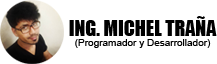
<style>
.page{position:relative;width:217px;height:64px;background:#ffffff}
.page>*{position:absolute;margin:0}
.t1{font:20px "Impact";color:#000000}
.t2{font:10px "ArialMT";color:#000000}
</style>
<div class="page">
<p class="t1" style="left:69px;top:16px;width:148px;height:20px">ING. MICHEL TRAÑA</p>
<p class="t2" style="left:75px;top:39px;width:136px;height:9px">(Programador y Desarrollador)</p>
</div>
